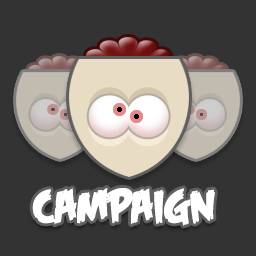
<style>
.page{position:relative;width:256px;height:256px;background:#333333}
.page>*{position:absolute;margin:0}
.t1{font:48px "FeastofFleshBB";color:#ffffff;font-weight:bold}
</style>
<div class="page">
<p class="t1" style="left:32px;top:188px;width:183px;height:38px">Campaign</p>
</div>
